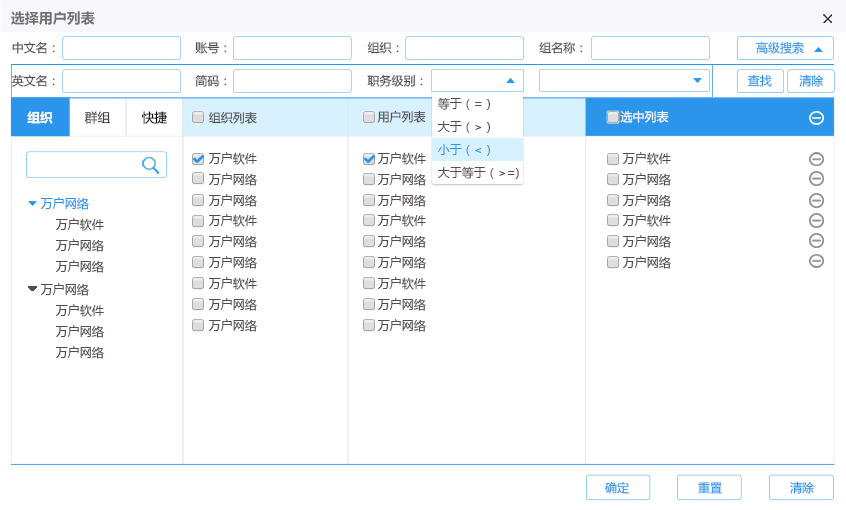
<style>
.page{position:relative;width:846px;height:510px;background:#ffffff}
.page>*{position:absolute;margin:0}
.t1{font:14px "MicrosoftYaHei-Bold";color:#726f6f}
.t2{font:12px "MicrosoftYaHei";color:#544c4c}
.t3{font:12px "MicrosoftYaHei";color:#2795ed}
.t4{font:12.6px "MicrosoftYaHei-Bold";color:#ffffff}
.t5{font:12.6px "MicrosoftYaHei";color:#3e4244}
.t6{font:12.6px "MicrosoftYaHei";color:#000101}
.t7{font:12px "MicrosoftYaHei";color:#ffffff}
.t8{font:12px "MicrosoftYaHei";color:#2a95eb}
.t9{font:12px "MicrosoftYaHei";color:#2196f3}
.t10{font:12px "MicrosoftYaHei"}
</style>
<div class="page">
<p class="t1" style="left:11px;top:11px;width:84px;height:14px">选择用户列表</p>
<p class="t2" style="left:12px;top:41px;width:43px;height:13px">中文名：</p>
<p class="t2" style="left:367px;top:41px;width:32px;height:13px">组织：</p>
<p class="t3" style="left:756px;top:41px;width:48px;height:13px">高级搜索</p>
<p class="t2" style="left:195px;top:42px;width:32px;height:12px">账号：</p>
<p class="t2" style="left:539px;top:42px;width:44px;height:12px">组名称：</p>
<p class="t2" style="left:11px;top:74px;width:44px;height:13px">英文名：</p>
<p class="t2" style="left:195px;top:74px;width:32px;height:13px">简码：</p>
<p class="t2" style="left:367px;top:74px;width:56px;height:13px">职务级别：</p>
<p class="t3" style="left:747px;top:74px;width:25px;height:13px">查找</p>
<p class="t3" style="left:799px;top:74px;width:25px;height:13px">清除</p>
<p class="t2" style="left:437px;top:97px;width:53px;height:13px">等于（=）</p>
<p class="t4" style="left:27px;top:111px;width:26px;height:13px">组织</p>
<p class="t5" style="left:84px;top:111px;width:27px;height:13px">群组</p>
<p class="t6" style="left:141px;top:111px;width:26px;height:13px">快捷</p>
<p class="t2" style="left:209px;top:111px;width:48px;height:13px">组织列表</p>
<p class="t2" style="left:377px;top:110px;width:49px;height:13px">用户列表</p>
<p class="t7" style="left:620px;top:110px;width:49px;height:13px">选中列表</p>
<p class="t2" style="left:437px;top:121px;width:53px;height:12px">大于（&gt;）</p>
<p class="t8" style="left:438px;top:144px;width:52px;height:12px">小于（&lt;）</p>
<p class="t2" style="left:208px;top:152px;width:49px;height:13px">万户软件</p>
<p class="t2" style="left:377px;top:152px;width:49px;height:13px">万户软件</p>
<p class="t2" style="left:622px;top:152px;width:49px;height:13px">万户软件</p>
<p class="t2" style="left:208px;top:173px;width:49px;height:13px">万户网络</p>
<p class="t2" style="left:377px;top:173px;width:49px;height:13px">万户网络</p>
<p class="t2" style="left:437px;top:166px;width:82px;height:13px">大于等于（&gt;=)</p>
<p class="t2" style="left:622px;top:173px;width:49px;height:13px">万户网络</p>
<p class="t9" style="left:40px;top:197px;width:49px;height:13px">万户网络</p>
<p class="t2" style="left:208px;top:194px;width:49px;height:13px">万户网络</p>
<p class="t2" style="left:377px;top:194px;width:49px;height:13px">万户网络</p>
<p class="t2" style="left:622px;top:194px;width:49px;height:13px">万户网络</p>
<p class="t2" style="left:55px;top:218px;width:49px;height:13px">万户软件</p>
<p class="t2" style="left:208px;top:214px;width:49px;height:13px">万户软件</p>
<p class="t2" style="left:377px;top:214px;width:49px;height:13px">万户软件</p>
<p class="t2" style="left:622px;top:214px;width:49px;height:13px">万户软件</p>
<p class="t2" style="left:55px;top:239px;width:49px;height:13px">万户网络</p>
<p class="t2" style="left:208px;top:235px;width:49px;height:13px">万户网络</p>
<p class="t2" style="left:377px;top:235px;width:49px;height:13px">万户网络</p>
<p class="t2" style="left:622px;top:235px;width:49px;height:13px">万户网络</p>
<p class="t2" style="left:208px;top:256px;width:49px;height:13px">万户网络</p>
<p class="t2" style="left:377px;top:256px;width:49px;height:13px">万户网络</p>
<p class="t2" style="left:622px;top:256px;width:49px;height:13px">万户网络</p>
<p class="t2" style="left:55px;top:260px;width:49px;height:13px">万户网络</p>
<p class="t2" style="left:208px;top:277px;width:49px;height:13px">万户软件</p>
<p class="t2" style="left:377px;top:277px;width:49px;height:13px">万户软件</p>
<p class="t2" style="left:40px;top:283px;width:49px;height:13px">万户网络</p>
<p class="t2" style="left:55px;top:304px;width:49px;height:13px">万户软件</p>
<p class="t2" style="left:208px;top:298px;width:49px;height:13px">万户网络</p>
<p class="t2" style="left:377px;top:298px;width:49px;height:13px">万户网络</p>
<p class="t2" style="left:55px;top:325px;width:49px;height:13px">万户网络</p>
<p class="t2" style="left:208px;top:319px;width:49px;height:13px">万户网络</p>
<p class="t2" style="left:377px;top:319px;width:49px;height:13px">万户网络</p>
<p class="t2" style="left:55px;top:346px;width:49px;height:13px">万户网络</p>
<p class="t3" style="left:605px;top:481px;width:24px;height:13px">确定</p>
<p class="t10" style="left:698px;top:482px;width:24px;height:12px">重置</p>
<p class="t3" style="left:790px;top:481px;width:24px;height:13px">清除</p>
</div>
